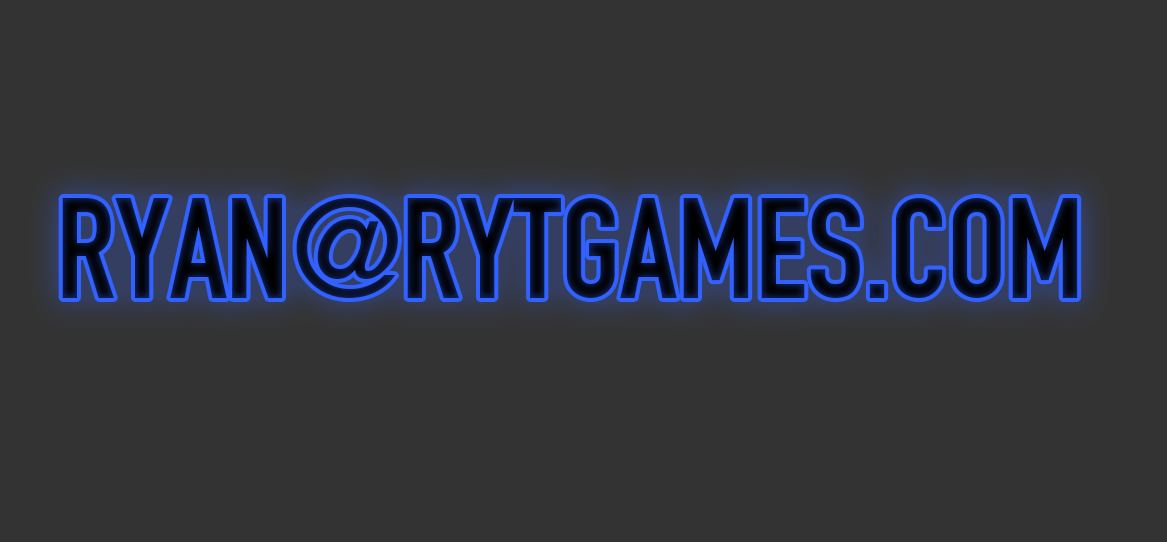
<style>
.page{position:relative;width:1167px;height:542px;background:#333333}
.page>*{position:absolute;margin:0}
.t1{font:140px "DINEngschrift"}
</style>
<div class="page">
<p class="t1" style="left:62px;top:198px;width:1016px;height:100px">RYAN@RYTGAMES.COM</p>
</div>
